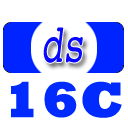
<style>
.page{position:relative;width:128px;height:128px;background:#ffffff}
.page>*{position:absolute;margin:0}
.t1{font:54px "Courier";color:#0000ff;font-style:italic;scale:0.67 1}
.t2{font:50.4px "Rockwell-ExtraBold";color:#002afe;font-weight:bold;scale:1.07 1}
</style>
<div class="page">
<p class="t1" style="left:43px;top:27px;width:40px;height:36px;opacity:0.97">ds</p>
<p class="t2" style="left:11px;top:81px;width:111px;height:37px">16C</p>
</div>
